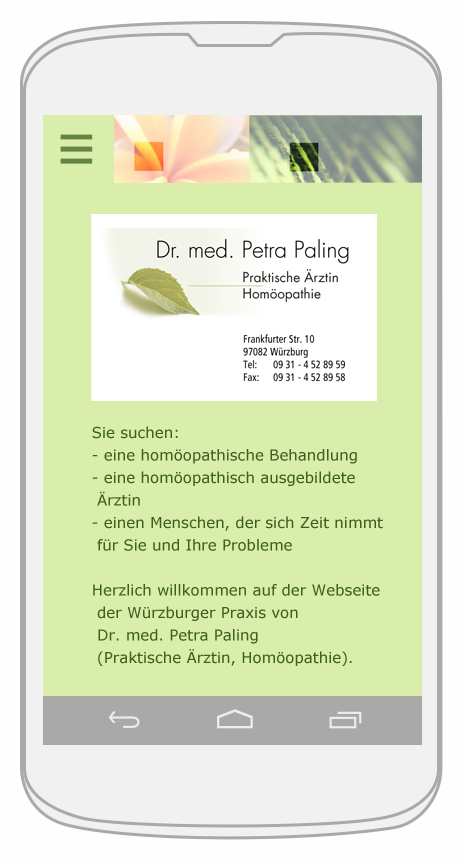
<style>
.page{position:relative;width:465px;height:861px;background:#d9eeaa}
.page>*{position:absolute;margin:0}
.t1{font:15px/22.5px "Verdana";color:#3e5f22}
</style>
<div class="page">
<p class="t1" style="left:92px;top:426px;width:291px;height:240px">Sie suchen:<br>- eine homöopathische Behandlung<br>- eine homöopathisch ausgebildete<br> Ärztin<br>- einen Menschen, der sich Zeit nimmt<br> für Sie und Ihre Probleme<br><br>Herzlich willkommen auf der Webseite<br> der Würzburger Praxis von<br> Dr. med. Petra Paling<br> (Praktische Ärztin, Homöopathie).</p>
</div>
